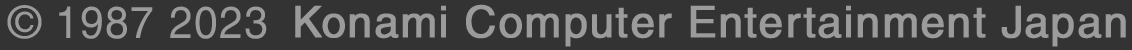
<style>
.page{position:relative;width:1132px;height:50px;background:#333333}
.page>*{position:absolute;margin:0}
.t1{font:44.7px "Helvetica";letter-spacing:0.03em;color:#9b9b9b}
.t2{font:44.7px "Helvetica";letter-spacing:0.03em;color:#9b9b9b;scale:0.95 1}
.t3{font:43.7px "Helvetica";letter-spacing:0.02em;color:#9b9b9b;font-weight:bold}
</style>
<div class="page">
<p class="t1" style="left:7px;top:5px;width:35px;height:34px">©</p>
<p class="t2" style="left:59px;top:6px;width:94px;height:33px">1987</p>
<p class="t2" style="left:170px;top:6px;width:97px;height:33px">2023</p>
<p class="t3" style="left:295px;top:4px;width:831px;height:43px">Konami Computer Entertainment Japan</p>
</div>
